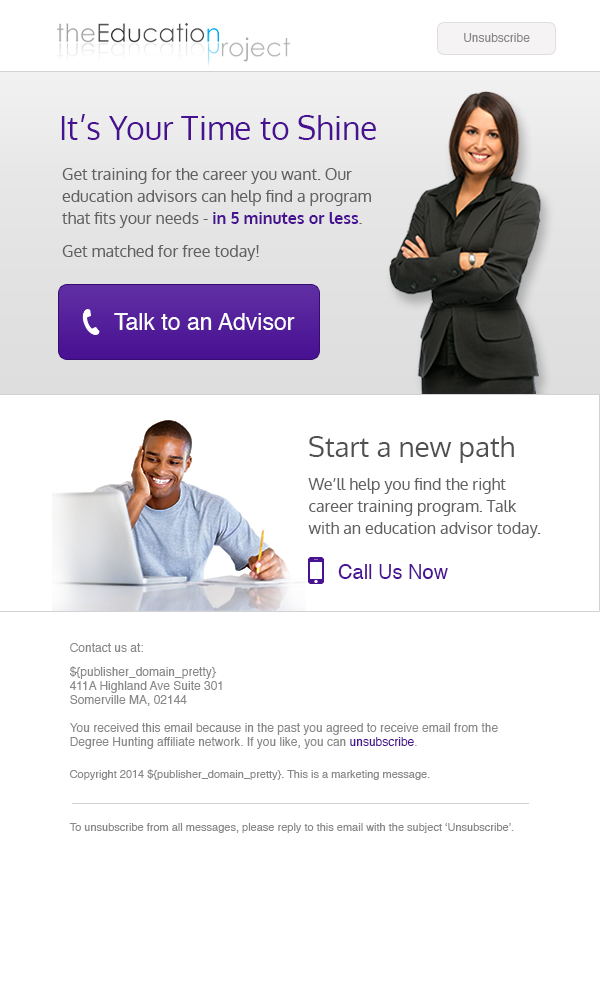
<style>
.page{position:relative;width:600px;height:1000px;background:#ffffff}
.page>*{position:absolute;margin:0}
.t1{font:12px "Helvetica";color:#898989}
.t2{font:32px "Oxygen-Regular";color:#481192}
.t3{font:16px/22px "Oxygen-Regular";color:#626262}
.t4{font:16px/22px "Oxygen-Bold";color:#481192}
.t5{font:16px "Oxygen-Regular";color:#626262}
.t6{font:23px "Helvetica";color:#fdfcfc}
.t7{font:28px "Oxygen-Regular";color:#515151}
.t8{font:20px "Helvetica";color:#4a1494}
.t9{font:12px/14px "Helvetica";color:#898989}
.t10{font:12px/14px "Helvetica";color:#4a1393}
.t11{font:11px "Helvetica";color:#898989}
</style>
<div class="page">
<p class="t1" style="left:464px;top:33px;width:66px;height:9px">Unsubscribe</p>
<p class="t2" style="left:61px;top:114px;width:315px;height:26px">It’s Your Time to Shine</p>
<p class="t3" style="left:62px;top:168px;width:309px;height:60px">Get training for the career you want. Our education advisors can help find a program that fits your needs - <span class="t4">in 5 minutes or less</span>.</p>
<p class="t5" style="left:62px;top:245px;width:197px;height:16px">Get matched for free today!</p>
<p class="t6" style="left:114px;top:313px;width:181px;height:17px">Talk to an Advisor</p>
<p class="t7" style="left:309px;top:436px;width:205px;height:27px">Start a new path</p>
<p class="t3" style="left:308px;top:478px;width:233px;height:60px">We’ll help you find the right career training program. Talk with an education advisor today.</p>
<p class="t8" style="left:338px;top:564px;width:110px;height:15px">Call Us Now</p>
<p class="t1" style="left:70px;top:643px;width:73px;height:9px">Contact us at:</p>
<p class="t9" style="left:69px;top:666px;width:153px;height:40px">${publisher_domain_pretty} <br>411A Highland Ave Suite 301 <br>Somerville MA, 02144</p>
<p class="t9" style="left:70px;top:723px;width:428px;height:26px">You received this email because in the past you agreed to receive email from the Degree Hunting affiliate network. If you like, you can <span class="t10">unsubscribe</span>.</p>
<p class="t11" style="left:70px;top:769px;width:360px;height:11px">Copyright 2014 ${publisher_domain_pretty}. This is a marketing message.</p>
<p class="t11" style="left:69px;top:823px;width:445px;height:10px">To unsubscribe from all messages, please reply to this email with the subject ‘Unsubscribe’.</p>
</div>
